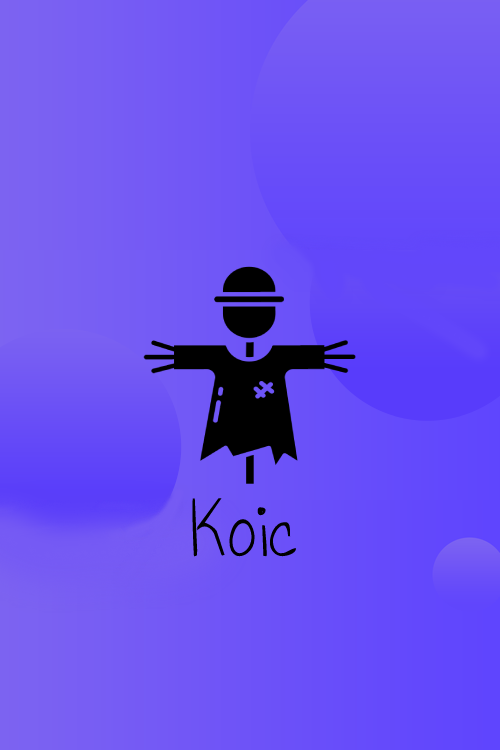
<style>
.page{position:relative;width:500px;height:750px}
.page>*{position:absolute;margin:0}
.t1{font:81px "AnnieUseYourTelescope-Regular";color:#000000}
</style>
<div class="page">
<p class="t1" style="left:192px;top:498px;width:105px;height:59px">Koic</p>
</div>
